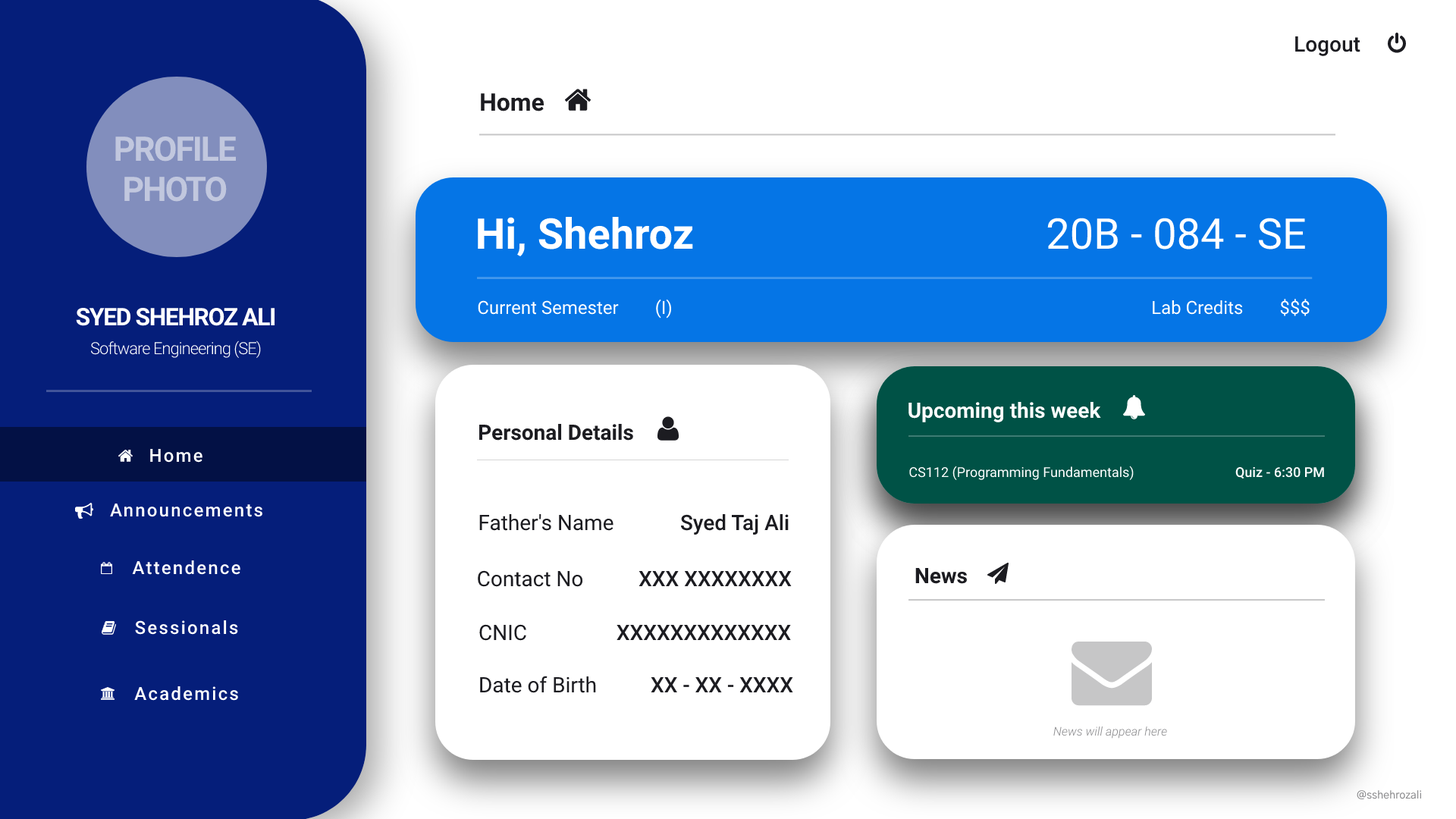
<style>
.page{position:relative;width:1456px;height:819px;background:#ffffff}
.page>*{position:absolute;margin:0}
.t1{font:21.2px "Roboto-Medium";color:#1c1c21}
.t2{font:24.3px "Roboto-Bold";color:#1c1c21}
.t3{font:33.8px "Roboto-Bold";letter-spacing:-0.046em;color:#c1c7de}
.t4{font:42.5px "Roboto-Bold";color:#ffffff}
.t5{font:42.5px "Roboto-Regular";color:#ffffff}
.t6{font:18.2px "Roboto-Regular";color:#ffffff}
.t7{font:24.3px "Roboto-Bold";letter-spacing:-0.046em;color:#ffffff}
.t8{font:16.7px "Roboto-Light";letter-spacing:-0.046em;color:#ffffff}
.t9{font:21.2px "Roboto-Bold";color:#ffffff}
.t10{font:21.2px "Roboto-Bold";color:#1c1c21}
.t11{font:18.2px "Roboto-Medium";letter-spacing:0.092em;color:#ffffff}
.t12{font:13.6px "Roboto-Regular";color:#ffffff}
.t13{font:13.6px "Roboto-Medium";color:#ffffff}
.t14{font:13.6px "Roboto-Medium"}
.t15{font:21.2px "Roboto-Regular";color:#1c1c21}
.t16{font:12.1px "Roboto-LightItalic";color:#8d8d90}
.t17{font:10.6px "GothicA1-Medium";color:#8d8d90}
</style>
<div class="page">
<p class="t1" style="left:1295px;top:36px;width:65px;height:20px">Logout</p>
<p class="t2" style="left:481px;top:93px;width:63px;height:18px">Home</p>
<p class="t3" style="left:115px;top:136px;width:121px;height:66px;text-align:center">PROFILE<br>PHOTO</p>
<p class="t4" style="left:478px;top:217px;width:215px;height:39px">Hi, Shehroz</p>
<p class="t5" style="left:1047px;top:218px;width:258px;height:31px">20B - 084 - SE</p>
<p class="t6" style="left:478px;top:299px;width:194px;height:19px">Current Semester (I)</p>
<p class="t6" style="left:1153px;top:299px;width:157px;height:17px">Lab Credits $$$</p>
<p class="t7" style="left:76px;top:307px;width:199px;height:19px">SYED SHEHROZ ALI</p>
<p class="t8" style="left:90px;top:340px;width:171px;height:19px">Software Engineering (SE)</p>
<p class="t9" style="left:908px;top:402px;width:193px;height:20px">Upcoming this week</p>
<p class="t9" style="left:908px;top:402px;width:193px;height:20px">Upcoming this week</p>
<p class="t10" style="left:479px;top:424px;width:154px;height:17px">Personal Details</p>
<p class="t11" style="left:150px;top:448px;width:52px;height:15px">Home</p>
<p class="t12" style="left:909px;top:466px;width:225px;height:15px">CS112 (Programming Fundamentals)</p>
<p class="t12" style="left:909px;top:466px;width:225px;height:15px">CS112 (Programming Fundamentals)</p>
<p class="t13" style="left:1235px;top:466px;width:89px;height:13px">Quiz - 6:30 PM</p>
<p class="t14" style="left:1236px;top:466px;width:89px;height:13px">Quiz - 6:30 PM</p>
<p class="t11" style="left:110px;top:503px;width:152px;height:14px">Announcements</p>
<p class="t15" style="left:479px;top:514px;width:134px;height:17px">Father's Name</p>
<p class="t1" style="left:680px;top:514px;width:109px;height:21px">Syed Taj Ali</p>
<p class="t11" style="left:132px;top:560px;width:108px;height:15px">Attendence</p>
<p class="t10" style="left:915px;top:568px;width:52px;height:16px">News</p>
<p class="t15" style="left:478px;top:570px;width:105px;height:17px">Contact No</p>
<p class="t1" style="left:639px;top:571px;width:153px;height:16px">XXX XXXXXXXX</p>
<p class="t11" style="left:135px;top:620px;width:103px;height:15px">Sessionals</p>
<p class="t15" style="left:479px;top:624px;width:47px;height:17px">CNIC</p>
<p class="t1" style="left:617px;top:625px;width:174px;height:16px">XXXXXXXXXXXXX</p>
<p class="t15" style="left:480px;top:676px;width:116px;height:17px">Date of Birth</p>
<p class="t1" style="left:651px;top:677px;width:142px;height:16px">XX - XX - XXXX</p>
<p class="t11" style="left:134px;top:686px;width:104px;height:15px">Academics</p>
<p class="t16" style="left:1053px;top:726px;width:114px;height:13px">News will appear here</p>
<p class="t17" style="left:1357px;top:790px;width:65px;height:10px">@sshehrozali</p>
</div>
